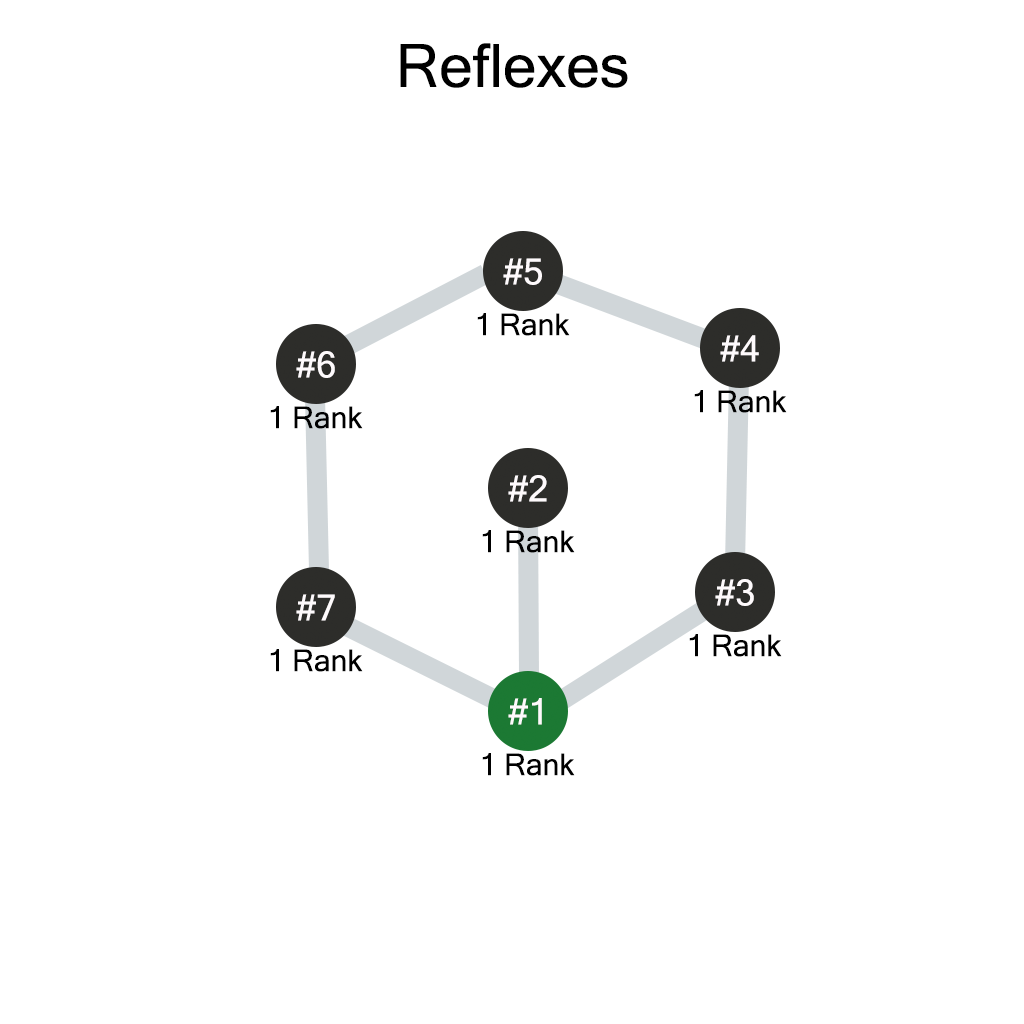
<style>
.page{position:relative;width:1024px;height:1024px;background:#ffffff}
.page>*{position:absolute;margin:0}
.t1{font:60px "MicrosoftSansSerif";color:#000000}
.t2{font:36px "MicrosoftSansSerif";color:#fefafc}
.t3{font:30px "MicrosoftSansSerif";color:#000000}
</style>
<div class="page">
<p class="t1" style="left:400px;top:43px;width:228px;height:45px">Reflexes</p>
<p class="t2" style="left:503px;top:258px;width:39px;height:27px">#5</p>
<p class="t3" style="left:477px;top:313px;width:93px;height:23px">1 Rank</p>
<p class="t2" style="left:720px;top:335px;width:39px;height:27px">#4</p>
<p class="t2" style="left:296px;top:351px;width:39px;height:27px">#6</p>
<p class="t3" style="left:694px;top:390px;width:93px;height:23px">1 Rank</p>
<p class="t3" style="left:270px;top:406px;width:93px;height:23px">1 Rank</p>
<p class="t2" style="left:508px;top:475px;width:39px;height:27px">#2</p>
<p class="t3" style="left:482px;top:530px;width:93px;height:23px">1 Rank</p>
<p class="t2" style="left:715px;top:579px;width:39px;height:27px">#3</p>
<p class="t2" style="left:296px;top:594px;width:39px;height:27px">#7</p>
<p class="t3" style="left:689px;top:634px;width:93px;height:23px">1 Rank</p>
<p class="t3" style="left:270px;top:649px;width:93px;height:23px">1 Rank</p>
<p class="t2" style="left:508px;top:698px;width:34px;height:27px">#1</p>
<p class="t3" style="left:482px;top:753px;width:93px;height:23px">1 Rank</p>
</div>
